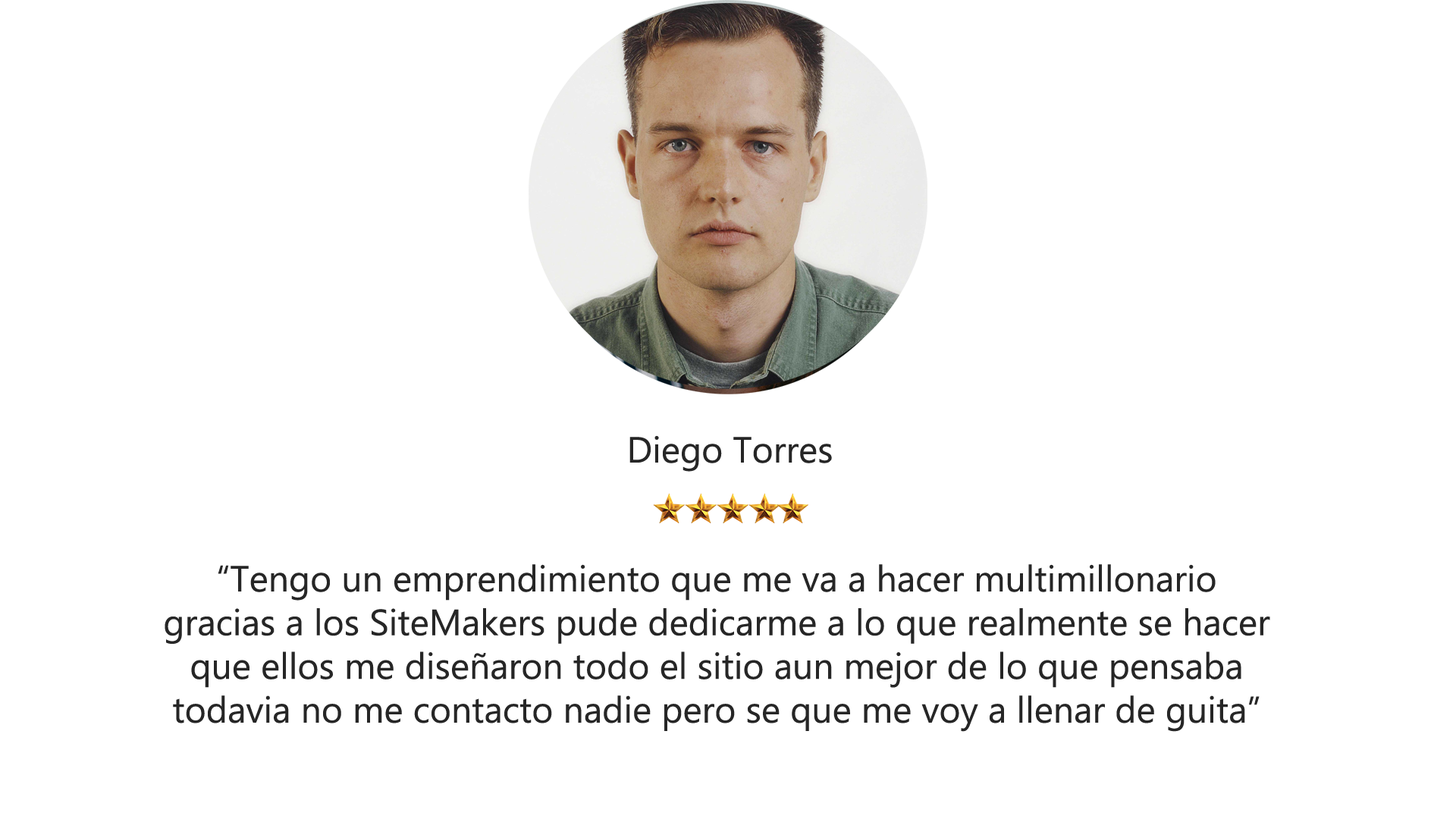
<style>
.page{position:relative;width:1456px;height:819px;background:#ffffff}
.page>*{position:absolute;margin:0}
.t1{font:36.4px "Gadugi";color:#262626}
</style>
<div class="page">
<p class="t1" style="left:629px;top:435px;width:203px;height:37px">Diego Torres</p>
<p class="t1" style="left:165px;top:564px;width:1105px;height:168px;text-align:center">“Tengo un emprendimiento que me va a hacer multimillonario<br>gracias a los SiteMakers pude dedicarme a lo que realmente se hacer<br>que ellos me diseñaron todo el sitio aun mejor de lo que pensaba<br>todavia no me contacto nadie pero se que me voy a llenar de guita”</p>
</div>
